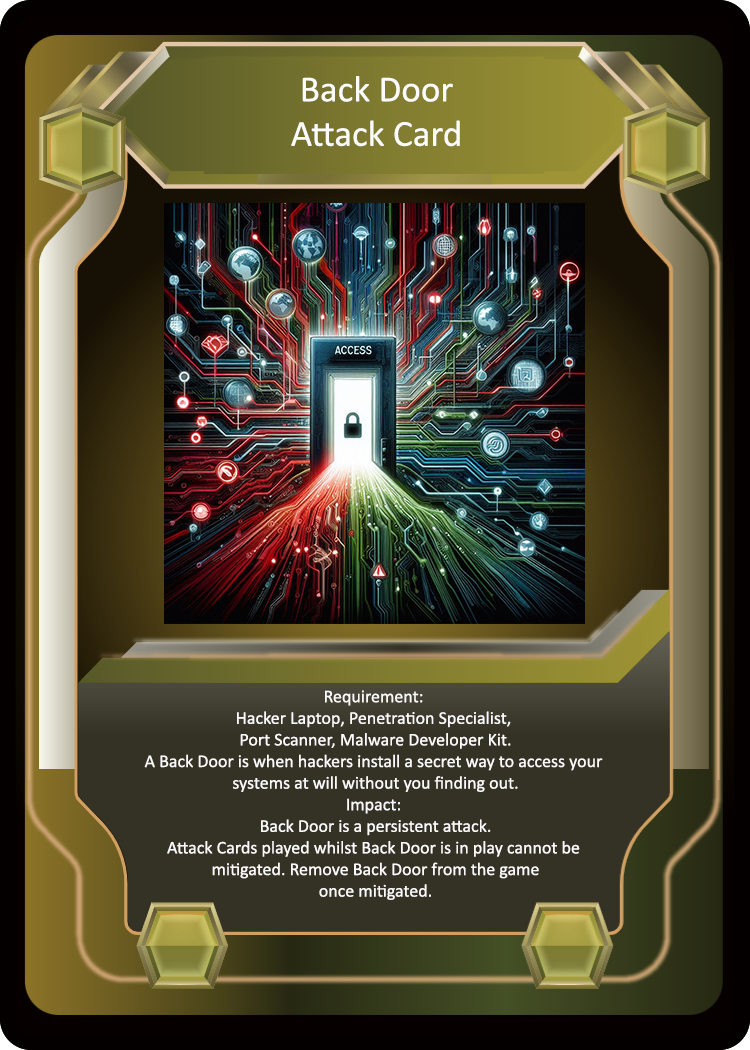
<style>
.page{position:relative;width:750px;height:1050px}
.page>*{position:absolute;margin:0}
.t1{font:37px "Calibri";color:#fcfbfb}
.t2{font:18px "Calibri";color:#fcfbfb}
</style>
<div class="page">
<p class="t1" style="left:291px;top:76px;width:169px;height:71px;text-align:center">Back Door<br>Attack Card</p>
<p class="t2" style="left:144px;top:690px;width:459px;height:210px;text-align:center">Requirement: <br>Hacker Laptop, Penetration Specialist, <br>Port Scanner, Malware Developer Kit.<br>A Back Door is when hackers install a secret way to access your <br>systems at will without you finding out.<br>Impact: <br>Back Door is a persistent attack.<br>Attack Cards played whilst Back Door is in play cannot be <br>mitigated. Remove Back Door from the game<br>once mitigated.</p>
</div>
